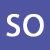
<style>
.page{position:relative;width:50px;height:50px;background:#4f55a1}
.page>*{position:absolute;margin:0}
.t1{font:32px "MyriadPro-Regular";color:#ffffff;font-weight:bold}
</style>
<div class="page">
<p class="t1" style="left:6px;top:14px;width:38px;height:23px">SO</p>
</div>
